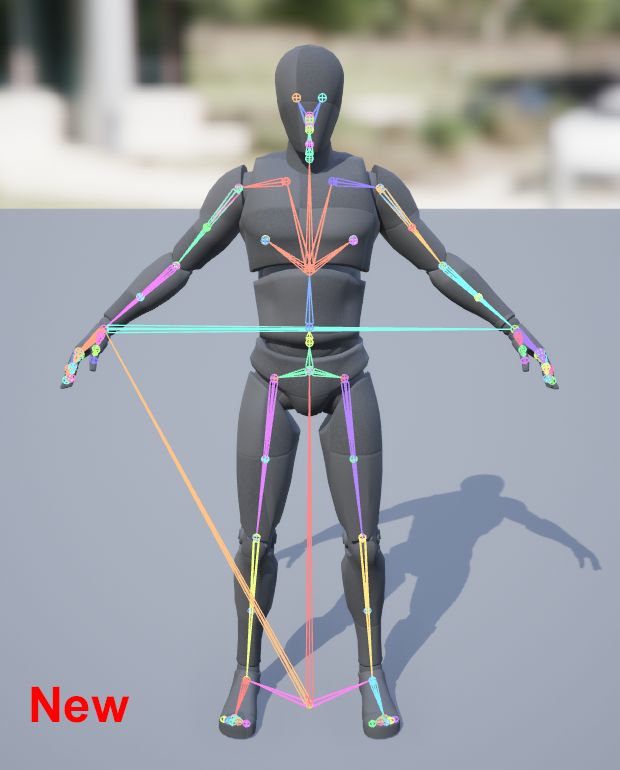
<style>
.page{position:relative;width:620px;height:770px}
.page>*{position:absolute;margin:0}
.t1{font:49px "Arial-BoldMT";color:#ff0000}
</style>
<div class="page">
<p class="t1" style="left:31px;top:686px;width:99px;height:37px">New</p>
</div>
